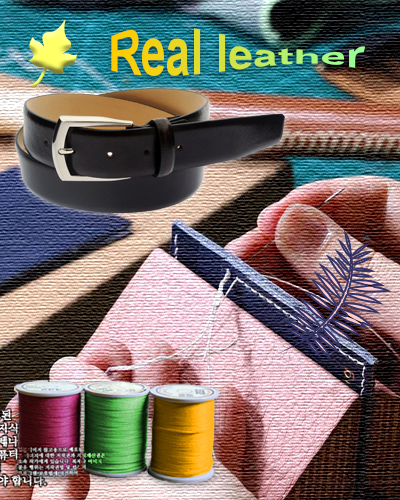
<style>
.page{position:relative;width:400px;height:500px}
.page>*{position:absolute;margin:0}
.t1{font:45px "Arial-BoldMT"}
</style>
<div class="page">
<p class="t1" style="left:111px;top:28px;width:254px;height:48px">Real leather</p>
</div>
